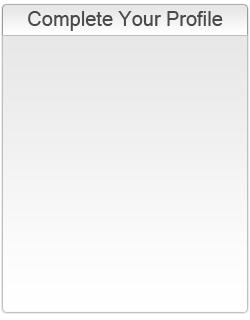
<style>
.page{position:relative;width:250px;height:320px}
.page>*{position:absolute;margin:0}
.t1{font:20px "MicrosoftSansSerif";color:#4a4a4a}
</style>
<div class="page">
<p class="t1" style="left:28px;top:11px;width:195px;height:20px">Complete Your Profile</p>
</div>
